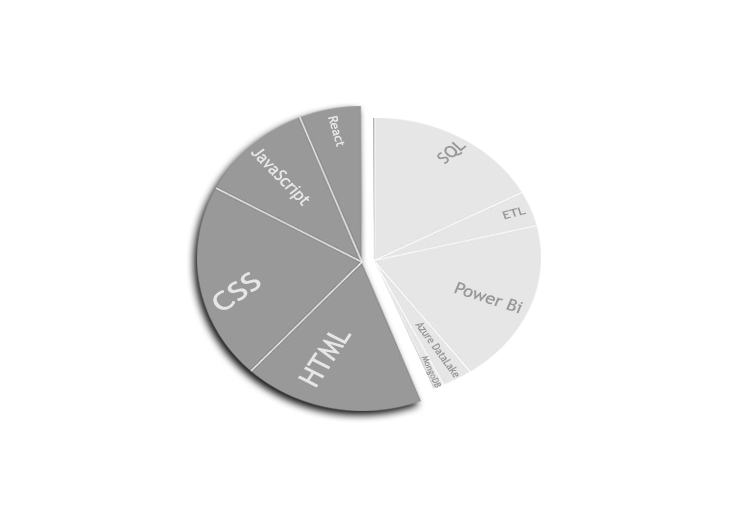
<style>
.page{position:relative;width:729px;height:510px;background:#ffffff}
.page>*{position:absolute;margin:0}
.t1{font:12.6px "TrebuchetMS";color:#e6e6e6}
.t2{font:17.5px "TrebuchetMS";color:#e6e6e6;scale:0.93 1}
.t3{font:17.1px "TrebuchetMS";color:#999999}
.t4{font:10.9px "TrebuchetMS";color:#999999;scale:1.3 1}
.t5{font:26.5px "TrebuchetMS";color:#e6e6e6;scale:1.25 1}
.t6{font:16.3px "TrebuchetMS";color:#999999;scale:1.11 1}
.t7{font:11.1px "TrebuchetMS";color:#999999;scale:0.86 1}
.t8{font:28.9px "TrebuchetMS";color:#e6e6e6;scale:0.92 1}
.t9{font:9px "TrebuchetMS";color:#999999;scale:0.95 1}
</style>
<div class="page">
<p class="t1" style="left:328px;top:115px;width:17px;height:32px;rotate:74deg">React</p>
<p class="t2" style="left:251px;top:148px;width:59px;height:59px;rotate:46deg">JavaScript</p>
<p class="t3" style="left:437px;top:141px;width:30px;height:23px;rotate:-40deg">SQL</p>
<p class="t4" style="left:502px;top:207px;width:24px;height:13px;rotate:-15deg">ETL</p>
<p class="t5" style="left:213px;top:272px;width:48px;height:38px;rotate:-35deg">CSS</p>
<p class="t6" style="left:454px;top:281px;width:69px;height:33px;rotate:18deg">Power Bi</p>
<p class="t7" style="left:415px;top:322px;width:44px;height:56px;rotate:54deg">Azure DataLake</p>
<p class="t8" style="left:298px;top:332px;width:54px;height:56px;rotate:-57deg">HTML</p>
<p class="t9" style="left:421px;top:356px;width:20px;height:32px;rotate:66deg">MongoDB</p>
</div>
